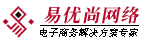
<style>
.page{position:relative;width:144px;height:41px;background:#ffffff}
.page>*{position:absolute;margin:0}
.t1{font:18px "CTLaoSongSJ";letter-spacing:0.075em;color:#b4092b;font-style:italic}
.t2{font:10px "SimHei";color:#000000;font-style:italic}
</style>
<div class="page">
<p class="t1" style="left:44px;top:6px;width:95px;height:18px">易优尚网络</p>
<p class="t2" style="left:40px;top:28px;width:98px;height:9px">电子商务解决方案专家</p>
</div>
